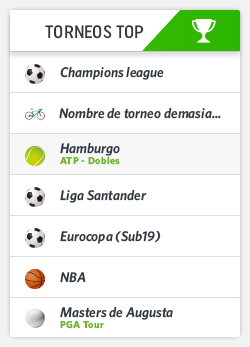
<style>
.page{position:relative;width:250px;height:347px;background:#ffffff}
.page>*{position:absolute;margin:0}
.t1{font:18px "UniformCondensed-Medium";color:#313840}
.t2{font:14px "Whitney-SemiboldItalic";color:#313840}
.t3{font:10px "Whitney-Bold";letter-spacing:0.04em;color:#6db62a}
</style>
<div class="page">
<p class="t1" style="left:45px;top:25px;width:99px;height:14px">TORNEOS TOP</p>
<p class="t2" style="left:59px;top:107px;width:162px;height:12px">Nombre de torneo demasia...</p>
<p class="t2" style="left:60px;top:142px;width:60px;height:14px">Hamburgo</p>
<p class="t3" style="left:60px;top:156px;width:60px;height:9px">ATP - Dobles</p>
<p class="t2" style="left:60px;top:189px;width:87px;height:14px">Liga Santander</p>
<p class="t2" style="left:60px;top:230px;width:101px;height:14px">Eurocopa (Sub19)</p>
<p class="t2" style="left:60px;top:272px;width:26px;height:11px">NBA</p>
<p class="t2" style="left:60px;top:306px;width:113px;height:14px">Masters de Augusta</p>
<p class="t3" style="left:60px;top:320px;width:44px;height:9px">PGA Tour</p>
</div>
